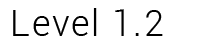
<style>
.page{position:relative;width:200px;height:50px;background:#ffffff}
.page>*{position:absolute;margin:0}
.t1{font:36px "Roboto-Light";letter-spacing:0.05em;color:#000000}
</style>
<div class="page">
<p class="t1" style="left:13px;top:8px;width:150px;height:28px">Level 1.2</p>
</div>
